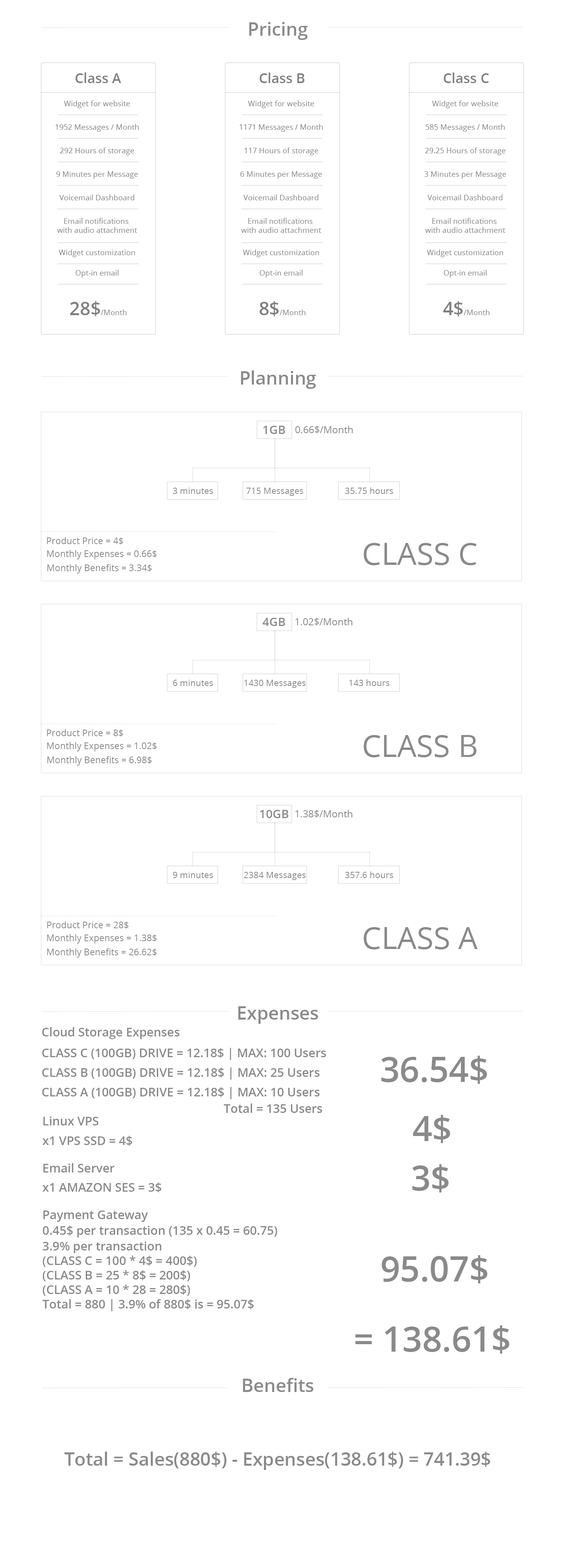
<style>
.page{position:relative;width:564px;height:1568px;background:#ffffff}
.page>*{position:absolute;margin:0}
.t1{font:18.3px "OpenSans-Semibold";color:#8a8a8a}
.t2{font:13.7px "OpenSans-Semibold";color:#808080}
.t3{font:7.6px "OpenSans";color:#808080}
.t4{font:18.3px "OpenSans-Semibold";color:#808080}
.t5{font:11.9px "OpenSans-Semibold";color:#8a8a8a}
.t6{font:9.7px "OpenSans";color:#8a8a8a}
.t7{font:8.8px "OpenSans";color:#8a8a8a}
.t8{font:9.1px "OpenSans";color:#8a8a8a}
.t9{font:30.7px "OpenSans";color:#8a8a8a}
.t10{font:12px "OpenSans-Semibold";color:#8a8a8a}
.t11{font:34.8px "OpenSans-Semibold";color:#8a8a8a}
</style>
<div class="page">
<p class="t1" style="left:249px;top:22px;width:59px;height:18px">Pricing</p>
<p class="t2" style="left:76px;top:73px;width:45px;height:10px">Class A</p>
<p class="t2" style="left:260px;top:73px;width:45px;height:10px">Class B</p>
<p class="t2" style="left:444px;top:73px;width:45px;height:10px">Class C</p>
<p class="t3" style="left:64px;top:100px;width:66px;height:8px">Widget for website</p>
<p class="t3" style="left:248px;top:100px;width:66px;height:8px">Widget for website</p>
<p class="t3" style="left:432px;top:100px;width:67px;height:8px">Widget for website</p>
<p class="t3" style="left:56px;top:124px;width:83px;height:8px">1952 Messages / Month</p>
<p class="t3" style="left:240px;top:124px;width:83px;height:8px">1171 Messages / Month</p>
<p class="t3" style="left:426px;top:124px;width:79px;height:8px">585 Messages / Month</p>
<p class="t3" style="left:60px;top:147px;width:74px;height:8px">292 Hours of storage</p>
<p class="t3" style="left:245px;top:147px;width:73px;height:8px">117 Hours of storage</p>
<p class="t3" style="left:425px;top:147px;width:81px;height:8px">29.25 Hours of storage</p>
<p class="t3" style="left:56px;top:171px;width:82px;height:8px">9 Minutes per Message</p>
<p class="t3" style="left:241px;top:171px;width:81px;height:8px">6 Minutes per Message</p>
<p class="t3" style="left:425px;top:171px;width:81px;height:8px">3 Minutes per Message</p>
<p class="t3" style="left:59px;top:194px;width:75px;height:6px">Voicemail Dashboard</p>
<p class="t3" style="left:243px;top:194px;width:76px;height:6px">Voicemail Dashboard</p>
<p class="t3" style="left:428px;top:194px;width:75px;height:6px">Voicemail Dashboard</p>
<p class="t3" style="left:57px;top:218px;width:80px;height:15px;text-align:center">Email notifications <br>with audio attachment</p>
<p class="t3" style="left:241px;top:218px;width:80px;height:15px;text-align:center">Email notifications <br>with audio attachment</p>
<p class="t3" style="left:426px;top:218px;width:80px;height:15px;text-align:center">Email notifications <br>with audio attachment</p>
<p class="t3" style="left:59px;top:249px;width:76px;height:8px">Widget customization</p>
<p class="t3" style="left:243px;top:249px;width:76px;height:8px">Widget customization</p>
<p class="t3" style="left:427px;top:249px;width:77px;height:8px">Widget customization</p>
<p class="t3" style="left:76px;top:270px;width:43px;height:8px">Opt-in email</p>
<p class="t3" style="left:260px;top:270px;width:43px;height:8px">Opt-in email</p>
<p class="t3" style="left:444px;top:270px;width:43px;height:8px">Opt-in email</p>
<p class="t3" style="left:70px;top:301px;width:57px;height:15px"><span class="t4">28$</span>/Month</p>
<p class="t3" style="left:260px;top:301px;width:46px;height:15px"><span class="t4">8$</span>/Month</p>
<p class="t3" style="left:443px;top:301px;width:47px;height:15px"><span class="t4">4$</span>/Month</p>
<p class="t1" style="left:241px;top:370px;width:75px;height:19px">Planning</p>
<p class="t5" style="left:263px;top:426px;width:22px;height:8px">1GB</p>
<p class="t6" style="left:296px;top:426px;width:57px;height:8px">0.66$/Month</p>
<p class="t7" style="left:173px;top:488px;width:40px;height:6px">3 minutes</p>
<p class="t7" style="left:247px;top:488px;width:56px;height:8px">715 Messages</p>
<p class="t7" style="left:345px;top:487px;width:49px;height:7px">35.75 hours</p>
<p class="t8" style="left:47px;top:537px;width:76px;height:7px">Product Price = 4$</p>
<p class="t9" style="left:364px;top:543px;width:113px;height:22px">CLASS C</p>
<p class="t8" style="left:47px;top:550px;width:110px;height:9px">Monthly Expenses = 0.66$</p>
<p class="t8" style="left:47px;top:564px;width:105px;height:9px">Monthly Benefits = 3.34$</p>
<p class="t5" style="left:263px;top:618px;width:22px;height:8px">4GB</p>
<p class="t6" style="left:296px;top:618px;width:57px;height:8px">1.02$/Month</p>
<p class="t7" style="left:173px;top:680px;width:40px;height:6px">6 minutes</p>
<p class="t7" style="left:245px;top:680px;width:61px;height:8px">1430 Messages</p>
<p class="t7" style="left:350px;top:679px;width:40px;height:7px">143 hours</p>
<p class="t8" style="left:47px;top:729px;width:76px;height:8px">Product Price = 8$</p>
<p class="t9" style="left:364px;top:735px;width:113px;height:22px">CLASS B</p>
<p class="t8" style="left:47px;top:742px;width:110px;height:9px">Monthly Expenses = 1.02$</p>
<p class="t8" style="left:47px;top:756px;width:105px;height:10px">Monthly Benefits = 6.98$</p>
<p class="t5" style="left:260px;top:810px;width:29px;height:8px">10GB</p>
<p class="t6" style="left:296px;top:810px;width:57px;height:8px">1.38$/Month</p>
<p class="t7" style="left:173px;top:872px;width:40px;height:6px">9 minutes</p>
<p class="t7" style="left:244px;top:872px;width:62px;height:8px">2384 Messages</p>
<p class="t7" style="left:345px;top:871px;width:49px;height:7px">357.6 hours</p>
<p class="t8" style="left:47px;top:921px;width:82px;height:8px">Product Price = 28$</p>
<p class="t9" style="left:364px;top:927px;width:114px;height:22px">CLASS A</p>
<p class="t8" style="left:47px;top:934px;width:110px;height:10px">Monthly Expenses = 1.38$</p>
<p class="t8" style="left:47px;top:948px;width:110px;height:10px">Monthly Benefits = 26.62$</p>
<p class="t1" style="left:238px;top:1006px;width:80px;height:18px">Expenses</p>
<p class="t10" style="left:42px;top:1027px;width:138px;height:12px">Cloud Storage Expenses</p>
<p class="t10" style="left:42px;top:1048px;width:285px;height:12px">CLASS C (100GB) DRIVE = 12.18$ | MAX: 100 Users</p>
<p class="t11" style="left:381px;top:1056px;width:107px;height:28px">36.54$</p>
<p class="t10" style="left:42px;top:1067px;width:278px;height:13px">CLASS B (100GB) DRIVE = 12.18$ | MAX: 25 Users</p>
<p class="t10" style="left:42px;top:1087px;width:278px;height:12px">CLASS A (100GB) DRIVE = 12.18$ | MAX: 10 Users</p>
<p class="t10" style="left:224px;top:1103px;width:99px;height:10px">Total = 135 Users</p>
<p class="t10" style="left:43px;top:1116px;width:56px;height:9px">Linux VPS</p>
<p class="t11" style="left:413px;top:1115px;width:38px;height:28px">4$</p>
<p class="t10" style="left:42px;top:1136px;width:90px;height:10px">x1 VPS SSD = 4$</p>
<p class="t10" style="left:43px;top:1163px;width:72px;height:9px">Email Server</p>
<p class="t11" style="left:412px;top:1164px;width:37px;height:28px">3$</p>
<p class="t10" style="left:42px;top:1182px;width:120px;height:10px">x1 AMAZON SES = 3$</p>
<p class="t10" style="left:43px;top:1210px;width:105px;height:12px">Payment Gateway</p>
<p class="t10" style="left:43px;top:1225px;width:235px;height:13px">0.45$ per transaction (135 x 0.45 = 60.75)</p>
<p class="t10" style="left:42px;top:1241px;width:212px;height:70px">3.9% per transaction <br>(CLASS C = 100 * 4$ = 400$)<br>(CLASS B = 25 * 8$ = 200$)<br>(CLASS A = 10 * 28 = 280$)<br>Total = 880 | 3.9% of 880$ is = 95.07$</p>
<p class="t11" style="left:382px;top:1255px;width:106px;height:28px">95.07$</p>
<p class="t11" style="left:356px;top:1325px;width:154px;height:29px">= 138.61$</p>
<p class="t1" style="left:243px;top:1378px;width:71px;height:14px">Benefits</p>
<p class="t1" style="left:64px;top:1452px;width:427px;height:18px">Total = Sales(880$) - Expenses(138.61$) = 741.39$</p>
</div>
